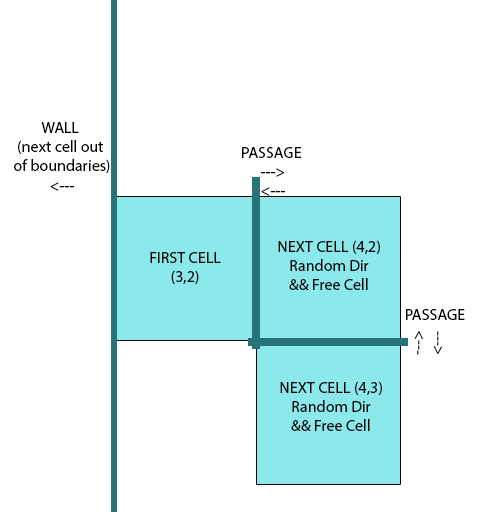
<style>
.page{position:relative;width:484px;height:512px;background:#ffffff}
.page>*{position:absolute;margin:0}
.t1{font:12px "MyriadPro-Regular";color:#000000}
</style>
<div class="page">
<p class="t1" style="left:14px;top:122px;width:96px;height:69px;text-align:center">WALL <br>(next cell out <br>of boundaries)<br>&lt;---</p>
<p class="t1" style="left:242px;top:147px;width:60px;height:49px;text-align:center">PASSAGE <br>---&gt;<br>&lt;---</p>
<p class="t1" style="left:278px;top:240px;width:102px;height:50px;text-align:center">NEXT CELL (4,2)<br>Random Dir<br>&amp;&amp; Free Cell</p>
<p class="t1" style="left:150px;top:252px;width:71px;height:32px;text-align:center">FIRST CELL<br>(3,2)</p>
<p class="t1" style="left:406px;top:309px;width:59px;height:11px">PASSAGE</p>
<p class="t1" style="left:414px;top:331px;width:29px;height:24px;text-align:center;rotate:-89deg">---&gt;<br>&lt;---</p>
<p class="t1" style="left:280px;top:381px;width:102px;height:50px;text-align:center">NEXT CELL (4,3)<br>Random Dir<br>&amp;&amp; Free Cell</p>
</div>
